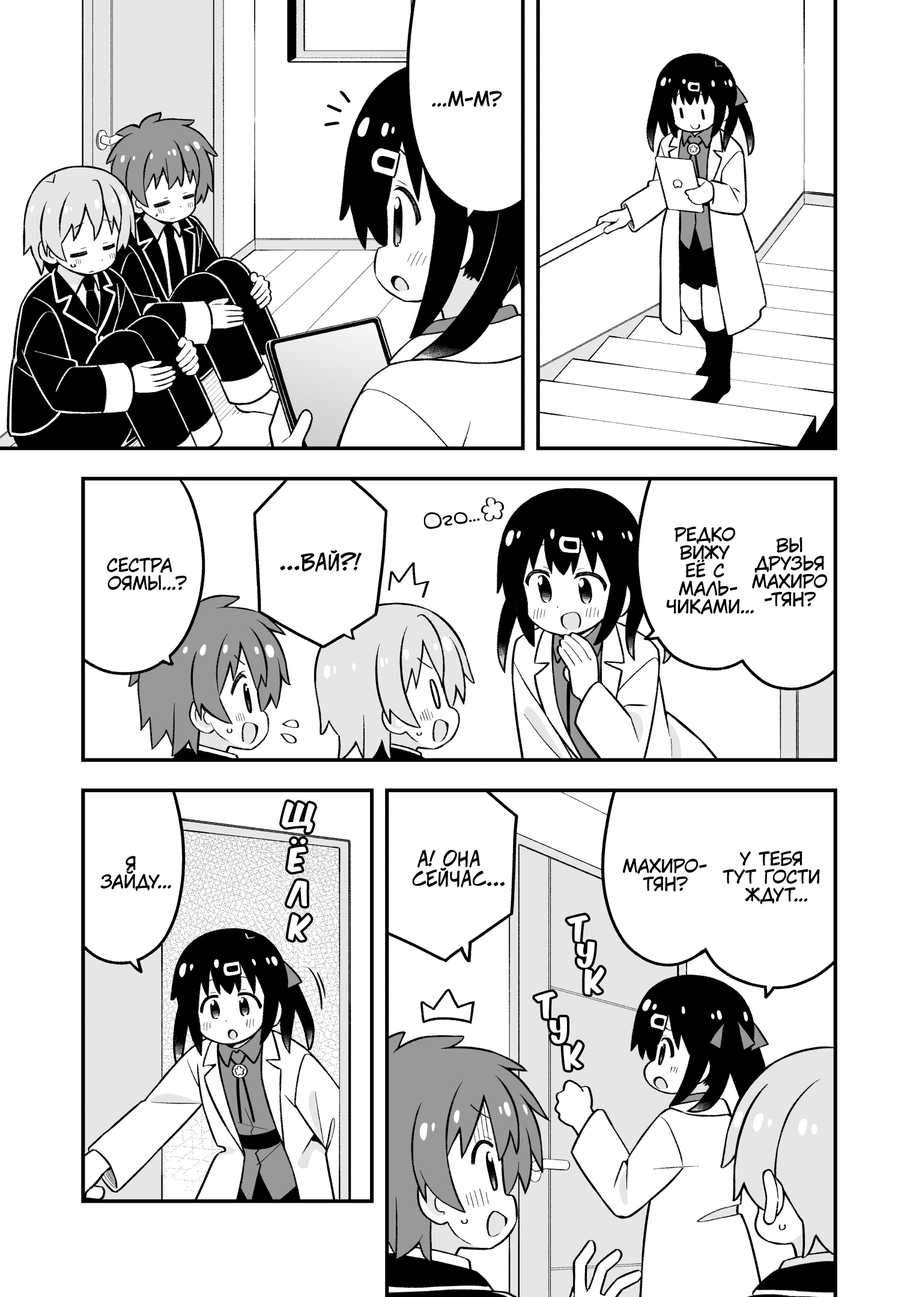
<style>
.page{position:relative;width:919px;height:1297px;background:#ffffff}
.page>*{position:absolute;margin:0}
.t1{font:19.8px "KuraiVoice2";color:#000000;text-transform:uppercase}
.t2{font:21.6px "v_Augie";color:#000000}
.t3{font:18px "KuraiVoice2";color:#000000;text-transform:uppercase}
.t4{font:21.6px "v_CCJeffCampbell";color:#000000;text-transform:uppercase}
.t5{font:28.8px "KomikaTitle-AxisRUS-LAT";color:#ffffff}
.t6{font:19.8px "v_CCJeffCampbell";color:#000000;text-transform:uppercase}
.t7{font:28.8px "KomikaTitle-AxisRUS-LAT";color:#ffffff;text-transform:uppercase}
</style>
<div class="page">
<p class="t1" style="left:432px;top:91px;width:70px;height:16px">...М-м?</p>
<p class="t2" style="left:423px;top:512px;width:57px;height:17px;rotate:-10deg">Ого...</p>
<p class="t3" style="left:666px;top:527px;width:88px;height:87px;text-align:center">Редко<br>вижу<br>её с<br>маль-<br>чиками...</p>
<p class="t3" style="left:752px;top:537px;width:76px;height:70px;text-align:center">Вы<br>друзья<br>Махиро<br>-тян?</p>
<p class="t3" style="left:107px;top:557px;width:80px;height:34px;text-align:center">Сестра<br>Оямы...?</p>
<p class="t4" style="left:280px;top:550px;width:82px;height:22px">...Вай?!</p>
<p class="t5" style="left:282px;top:802px;width:33px;height:31px;rotate:4deg">щ</p>
<p class="t5" style="left:287px;top:839px;width:19px;height:34px">ё</p>
<p class="t3" style="left:100px;top:856px;width:71px;height:35px;text-align:center">Я<br>зайду...</p>
<p class="t6" style="left:412px;top:850px;width:93px;height:38px;text-align:center">А! Она<br>сейчас...</p>
<p class="t3" style="left:723px;top:851px;width:97px;height:54px;text-align:center">У тебя<br>тут гости<br>ждут...</p>
<p class="t3" style="left:622px;top:858px;width:85px;height:34px;text-align:center">Махиро-<br>тян?</p>
<p class="t5" style="left:287px;top:881px;width:20px;height:26px;rotate:-2deg">л</p>
<p class="t5" style="left:288px;top:915px;width:23px;height:26px;rotate:3deg">к</p>
<p class="t7" style="left:567px;top:915px;width:21px;height:27px;rotate:-8deg">т</p>
<p class="t7" style="left:577px;top:942px;width:18px;height:26px;rotate:-6deg">у</p>
<p class="t7" style="left:584px;top:968px;width:20px;height:27px;rotate:-7deg">к</p>
<p class="t7" style="left:535px;top:992px;width:21px;height:27px;rotate:-11deg">т</p>
<p class="t7" style="left:550px;top:1018px;width:17px;height:27px;rotate:-13deg">у</p>
<p class="t7" style="left:563px;top:1042px;width:20px;height:29px;rotate:-13deg">к</p>
</div>
